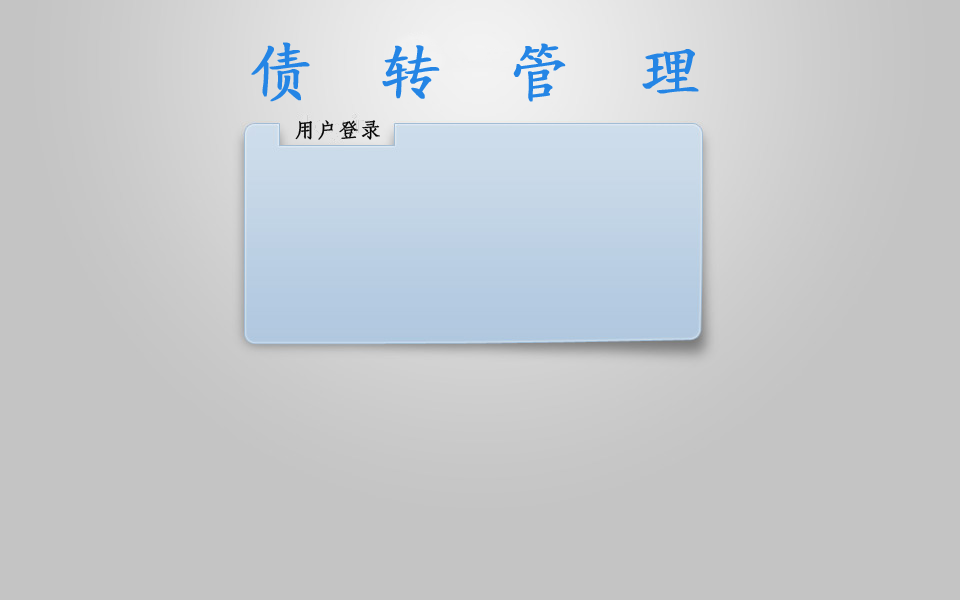
<style>
.page{position:relative;width:960px;height:600px;background:#c4c4c4}
.page>*{position:absolute;margin:0}
.t1{font:60px "KaiTi_GB2312";letter-spacing:1.14em;color:#2485e5;font-variant:small-caps;font-weight:bold}
.t2{font:20px "FangSong_GB2312";letter-spacing:0.06em;color:#060606;font-variant:small-caps;font-weight:bold}
</style>
<div class="page">
<p class="t1" style="left:251px;top:42px;width:448px;height:60px">债转管理</p>
<p class="t2" style="left:295px;top:120px;width:85px;height:20px">用户登录</p>
</div>
